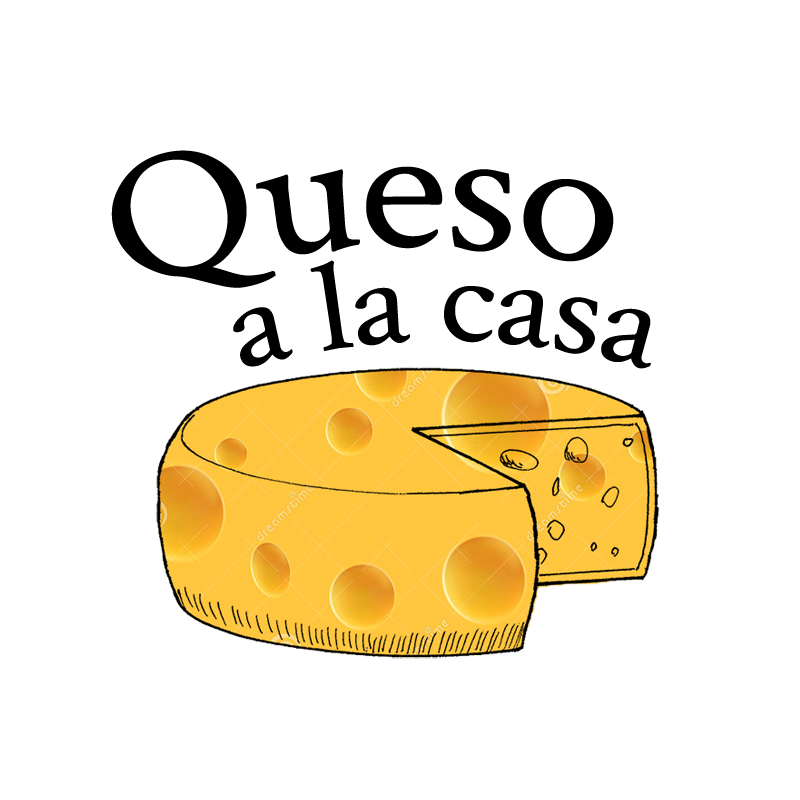
<style>
.page{position:relative;width:800px;height:800px;background:#ffffff}
.page>*{position:absolute;margin:0}
.t1{font:188.2px "CrimsonText-Roman";letter-spacing:-0.01em;color:#000000}
.t2{font:129.6px "CrimsonText-Roman";letter-spacing:-0.01em;color:#000000}
</style>
<div class="page">
<p class="t1" style="left:111px;top:150px;width:503px;height:138px;rotate:-1deg">Queso</p>
<p class="t2" style="left:233px;top:260px;width:418px;height:109px">a la casa</p>
</div>
